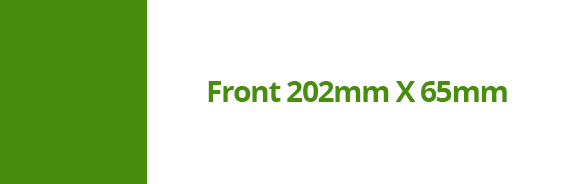
<style>
.page{position:relative;width:573px;height:184px;background:#ffffff}
.page>*{position:absolute;margin:0}
.t1{font:30px "OpenSans-Bold";letter-spacing:-0.05em;color:#498d0d}
</style>
<div class="page">
<p class="t1" style="left:208px;top:81px;width:299px;height:21px">Front 202mm X 65mm</p>
</div>
